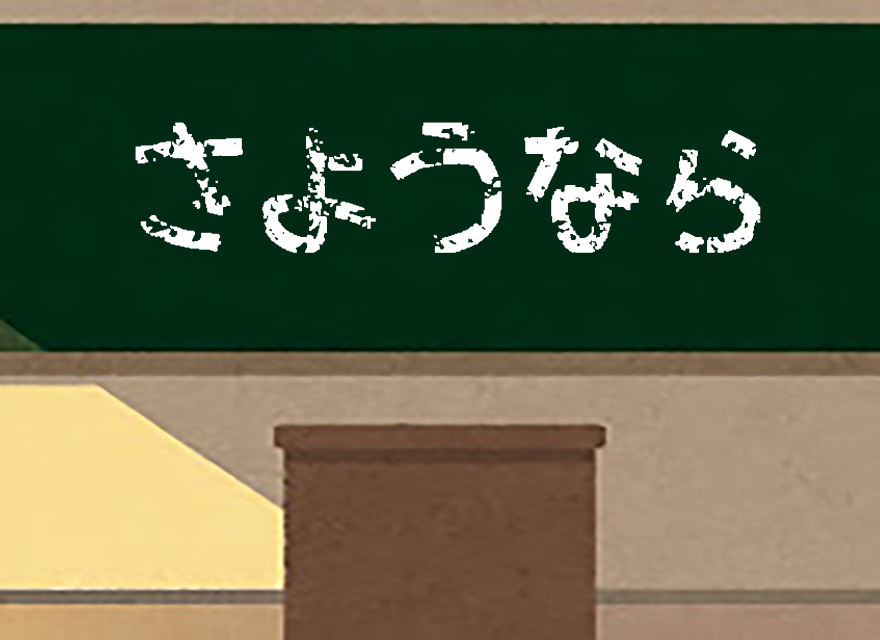
<style>
.page{position:relative;width:880px;height:640px}
.page>*{position:absolute;margin:0}
.t1{font:133.3px "FontFace";color:#ffffff}
</style>
<div class="page">
<p class="t1" style="left:135px;top:122px;width:626px;height:131px">さようなら</p>
</div>
